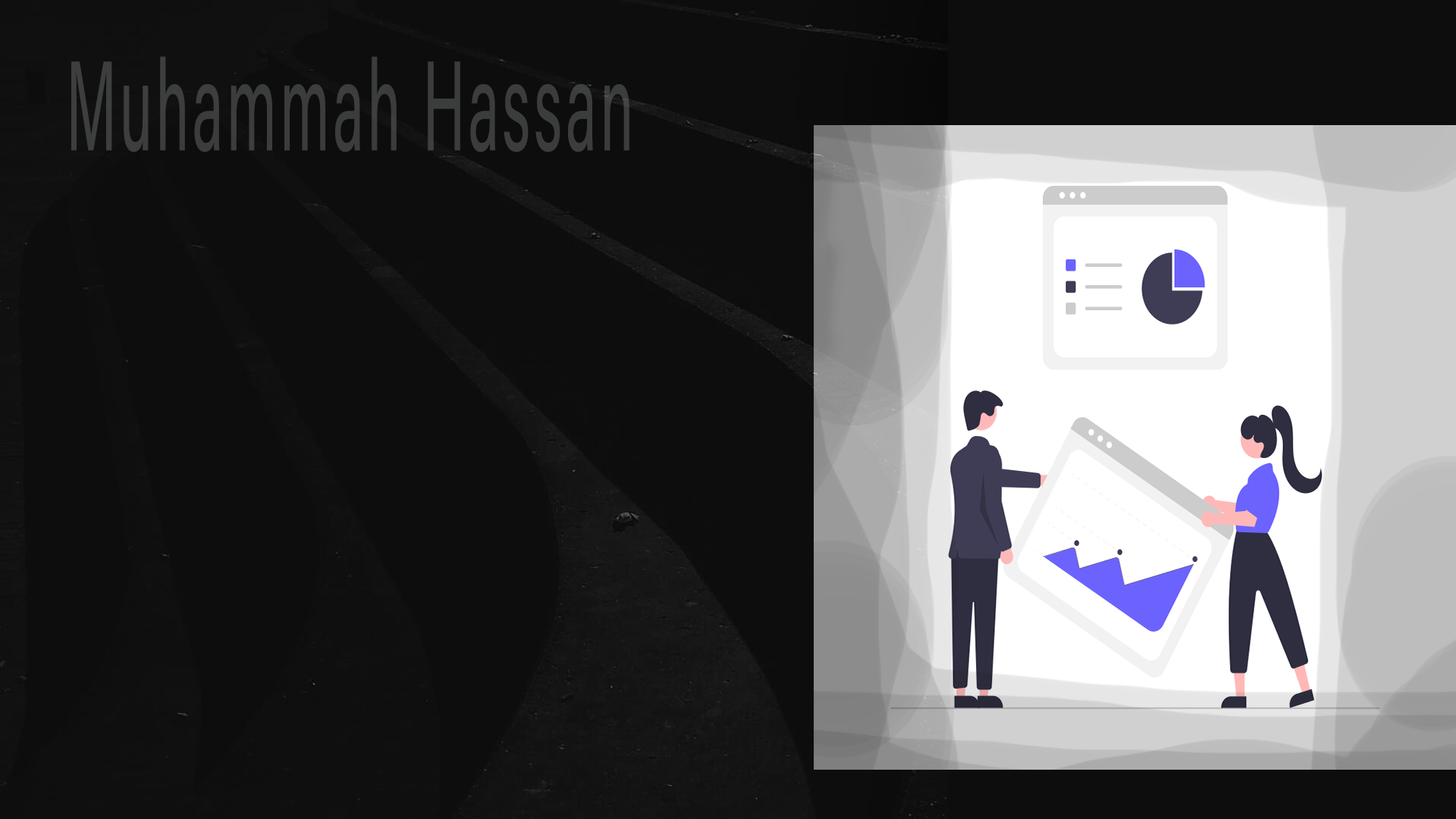
<style>
.page{position:relative;width:1456px;height:819px;background:#0d0d0d}
.page>*{position:absolute;margin:0}
.t1{font:127.1px "AcuminConcept-Regular";letter-spacing:0.06em;color:#3b3d3d;scale:0.46 1}
</style>
<div class="page">
<p class="t1" style="left:71px;top:56px;width:558px;height:96px">Muhammah Hassan</p>
</div>
